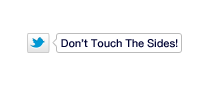
<style>
.page{position:relative;width:209px;height:86px;background:#ffffff}
.page>*{position:absolute;margin:0}
.t1{font:11px "HelveticaNeue-Medium";letter-spacing:-0.005em;color:#000333}
</style>
<div class="page">
<p class="t1" style="left:61px;top:39px;width:117px;height:9px">Don’t Touch The Sides!</p>
</div>
